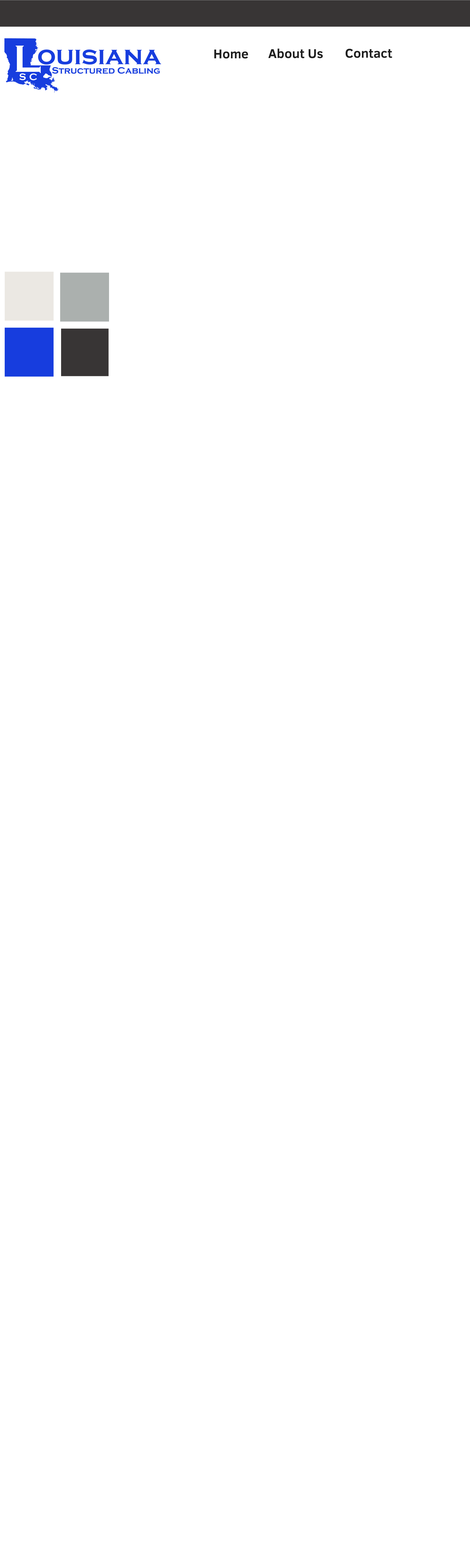
<style>
.page{position:relative;width:470px;height:1568px;background:#ffffff}
.page>*{position:absolute;margin:0}
.t1{font:13px "ClearSans-Bold";color:#1e1e1e}
</style>
<div class="page">
<p class="t1" style="left:215px;top:50px;width:33px;height:9px">Home</p>
<p class="t1" style="left:268px;top:49px;width:55px;height:9px">About Us</p>
<p class="t1" style="left:346px;top:49px;width:47px;height:9px">Contact</p>
</div>
